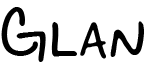
<style>
.page{position:relative;width:150px;height:63px;background:#ffffff}
.page>*{position:absolute;margin:0}
.t1{font:70.8px "Bareona";color:#000000}
</style>
<div class="page">
<p class="t1" style="left:1px;top:7px;width:143px;height:55px">Glan</p>
</div>
